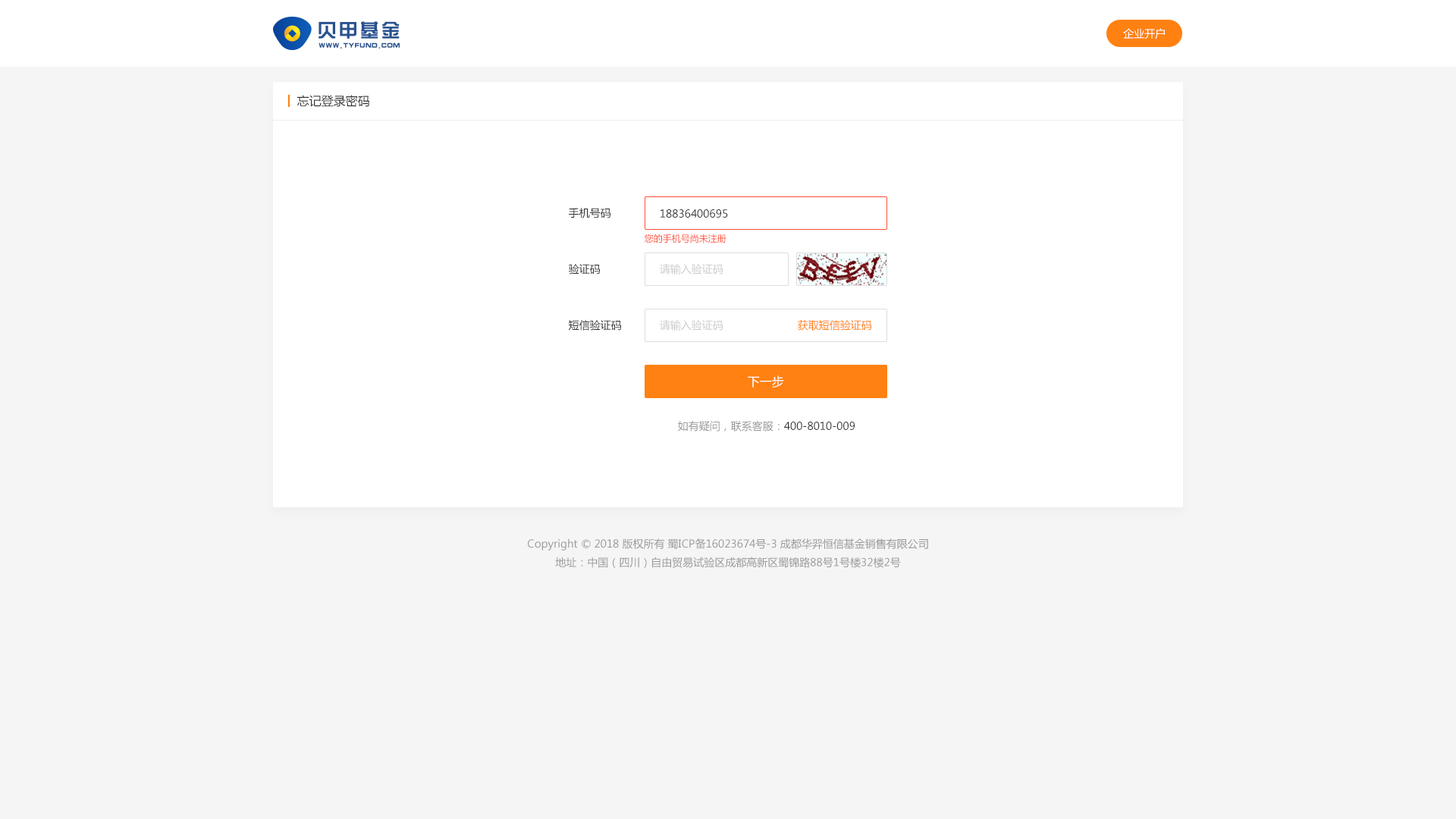
<style>
.page{position:relative;width:1456px;height:819px;background:#f5f5f5}
.page>*{position:absolute;margin:0}
.t1{font:10.6px "MicrosoftYaHei";color:#ffffff}
.t2{font:12.1px "MicrosoftYaHei";color:#333333}
.t3{font:10.6px "MicrosoftYaHei";color:#333333}
.t4{font:9.1px "MicrosoftYaHei";color:#ff4f38}
.t5{font:10.6px "MicrosoftYaHei";color:#cccccc}
.t6{font:10.6px "MicrosoftYaHei";color:#ff8111}
.t7{font:12.1px "MicrosoftYaHei";color:#ffffff}
.t8{font:10.6px "MicrosoftYaHei";color:#999999}
</style>
<div class="page">
<p class="t1" style="left:1123px;top:28px;width:42px;height:11px">企业开户</p>
<p class="t2" style="left:297px;top:95px;width:72px;height:12px">忘记登录密码</p>
<p class="t3" style="left:569px;top:208px;width:41px;height:10px">手机号码</p>
<p class="t3" style="left:660px;top:209px;width:68px;height:9px">18836400695</p>
<p class="t4" style="left:645px;top:234px;width:81px;height:9px">您的手机号尚未注册</p>
<p class="t3" style="left:568px;top:264px;width:32px;height:11px">验证码</p>
<p class="t5" style="left:660px;top:264px;width:63px;height:11px">请输入验证码</p>
<p class="t3" style="left:569px;top:320px;width:52px;height:11px">短信验证码</p>
<p class="t5" style="left:660px;top:320px;width:63px;height:11px">请输入验证码</p>
<p class="t6" style="left:798px;top:320px;width:73px;height:11px">获取短信验证码</p>
<p class="t7" style="left:748px;top:375px;width:36px;height:13px">下一步</p>
<p class="t3" style="left:678px;top:421px;width:177px;height:10px"><span class="t8">如有疑问，联系客服：</span>400-8010-009</p>
<p class="t8" style="left:528px;top:538px;width:400px;height:30px;text-align:center">Copyright © 2018 版权所有 蜀ICP备16023674号-3 成都华羿恒信基金销售有限公司<br>地址：中国（四川）自由贸易试验区成都高新区蜀锦路88号1号楼32楼2号</p>
</div>
